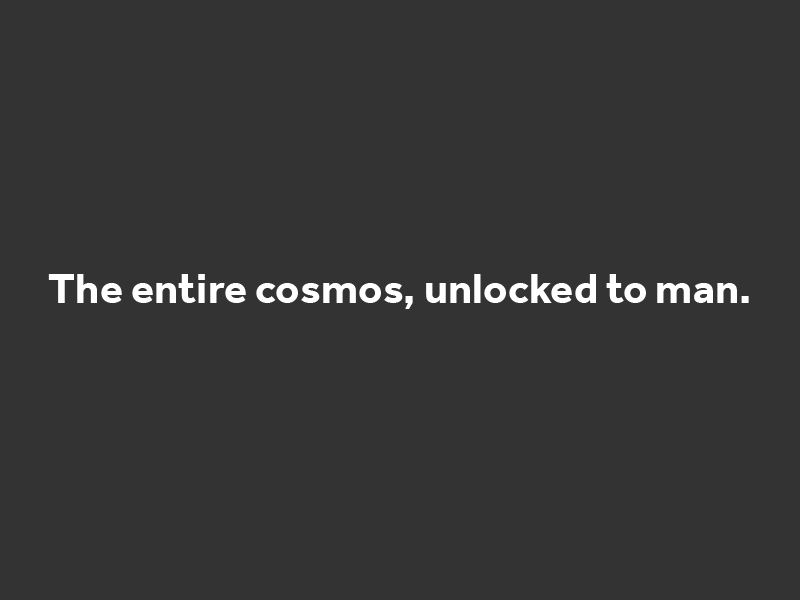
<style>
.page{position:relative;width:800px;height:600px;background:#333333}
.page>*{position:absolute;margin:0}
.t1{font:43.3px "Effra-Bold";color:#ffffff}
</style>
<div class="page">
<p class="t1" style="left:48px;top:274px;width:701px;height:35px">The entire cosmos, unlocked to man.</p>
</div>
